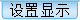
<style>
.page{position:relative;width:80px;height:20px}
.page>*{position:absolute;margin:0}
.t1{font:14px "SimSun";letter-spacing:0.1em;color:#000000}
</style>
<div class="page">
<p class="t1" style="left:10px;top:3px;width:59px;height:14px">设置显示</p>
</div>
